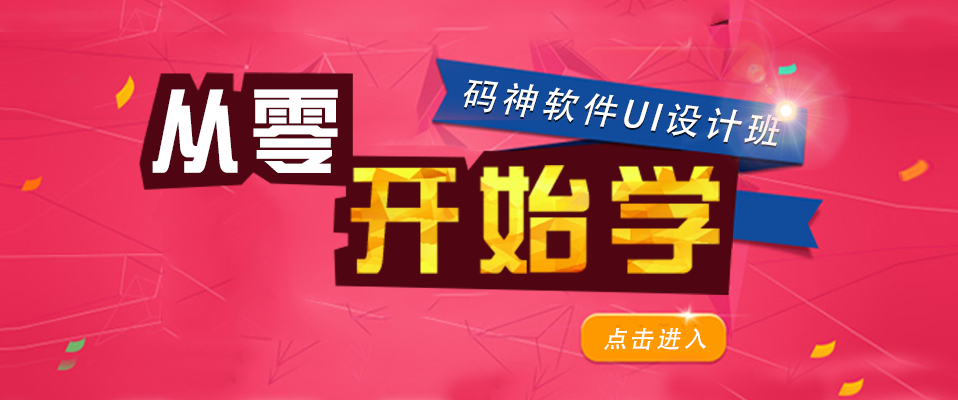
<style>
.page{position:relative;width:958px;height:400px}
.page>*{position:absolute;margin:0}
.t1{font:93.7px "DFZongYi-Bd-80-Win-GB";letter-spacing:0.08em;color:#ffffff}
.t2{font:36px "AdobeHeitiStd-Regular";letter-spacing:0.12em;color:#ffffff;font-style:italic}
.t3{font:24px "AdobeHeitiStd-Regular";letter-spacing:0.12em;color:#ffffff;font-style:italic}
</style>
<div class="page">
<p class="t1" style="left:152px;top:89px;width:186px;height:84px">从零</p>
<p class="t2" style="left:464px;top:79px;width:320px;height:67px;rotate:7deg">码神软件UI设计班</p>
<p class="t3" style="left:604px;top:328px;width:102px;height:22px">点击进入</p>
</div>
